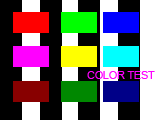
<style>
.page{position:relative;width:160px;height:120px;background:#000000}
.page>*{position:absolute;margin:0}
.t1{font:10.6px "ArialMT";color:#ff00ff}
</style>
<div class="page">
<p class="t1" style="left:87px;top:71px;width:68px;height:8px">COLOR TEST</p>
</div>
